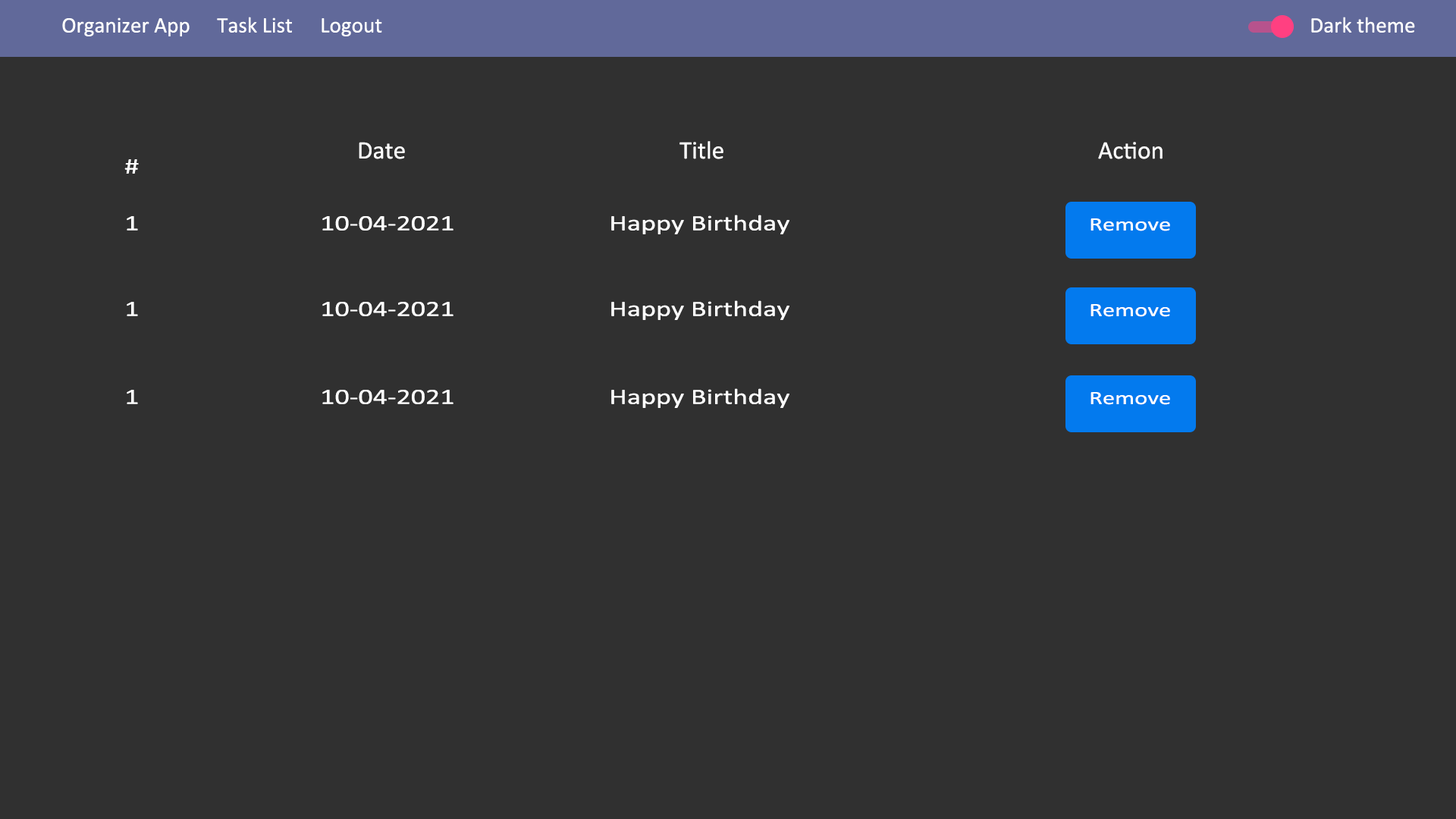
<style>
.page{position:relative;width:1456px;height:819px;background:#303030}
.page>*{position:absolute;margin:0}
.t1{font:22.1px "Calibri";color:#ffffff}
.t2{font:25.3px "Calibri";color:#ffffff}
.t3{font:22.1px "Calibri";color:#ffffff;scale:1.3 1}
.t4{font:19px "Calibri";color:#ffffff;scale:1.3 1}
</style>
<div class="page">
<p class="t1" style="left:62px;top:17px;width:128px;height:19px">Organizer App</p>
<p class="t1" style="left:217px;top:17px;width:75px;height:16px">Task List</p>
<p class="t1" style="left:1311px;top:17px;width:104px;height:16px">Dark theme</p>
<p class="t1" style="left:322px;top:18px;width:60px;height:18px">Logout</p>
<p class="t2" style="left:359px;top:142px;width:46px;height:17px">Date</p>
<p class="t2" style="left:679px;top:141px;width:44px;height:18px">Title</p>
<p class="t2" style="left:1098px;top:142px;width:65px;height:17px">Action</p>
<p class="t3" style="left:124px;top:159px;width:15px;height:15px">#</p>
<p class="t3" style="left:127px;top:216px;width:11px;height:15px">1</p>
<p class="t3" style="left:322px;top:216px;width:131px;height:15px">10-04-2021</p>
<p class="t3" style="left:611px;top:215px;width:178px;height:19px">Happy Birthday</p>
<p class="t4" style="left:1090px;top:218px;width:80px;height:13px">Remove</p>
<p class="t3" style="left:127px;top:302px;width:11px;height:14px">1</p>
<p class="t3" style="left:322px;top:302px;width:131px;height:14px">10-04-2021</p>
<p class="t3" style="left:611px;top:300px;width:178px;height:20px">Happy Birthday</p>
<p class="t4" style="left:1090px;top:304px;width:80px;height:13px">Remove</p>
<p class="t3" style="left:127px;top:390px;width:11px;height:14px">1</p>
<p class="t3" style="left:322px;top:390px;width:131px;height:14px">10-04-2021</p>
<p class="t3" style="left:611px;top:388px;width:178px;height:20px">Happy Birthday</p>
<p class="t4" style="left:1090px;top:392px;width:80px;height:13px">Remove</p>
</div>
